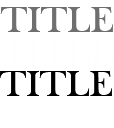
<style>
.page{position:relative;width:114px;height:128px;background:#ffffff}
.page>*{position:absolute;margin:0}
.t1{font:38px "BaskOldFace";color:#706f70}
.t2{font:38px "BaskOldFace";color:#000000}
</style>
<div class="page">
<p class="t1" style="left:0px;top:7px;width:113px;height:25px">TITLE</p>
<p class="t2" style="left:0px;top:71px;width:112px;height:25px">TITLE</p>
</div>
